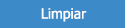
<style>
.page{position:relative;width:125px;height:28px;background:#3c8ac8}
.page>*{position:absolute;margin:0}
.t1{font:14px "Tahoma";color:#ffffff}
</style>
<div class="page">
<p class="t1" style="left:41px;top:8px;width:46px;height:14px">Limpiar</p>
</div>
